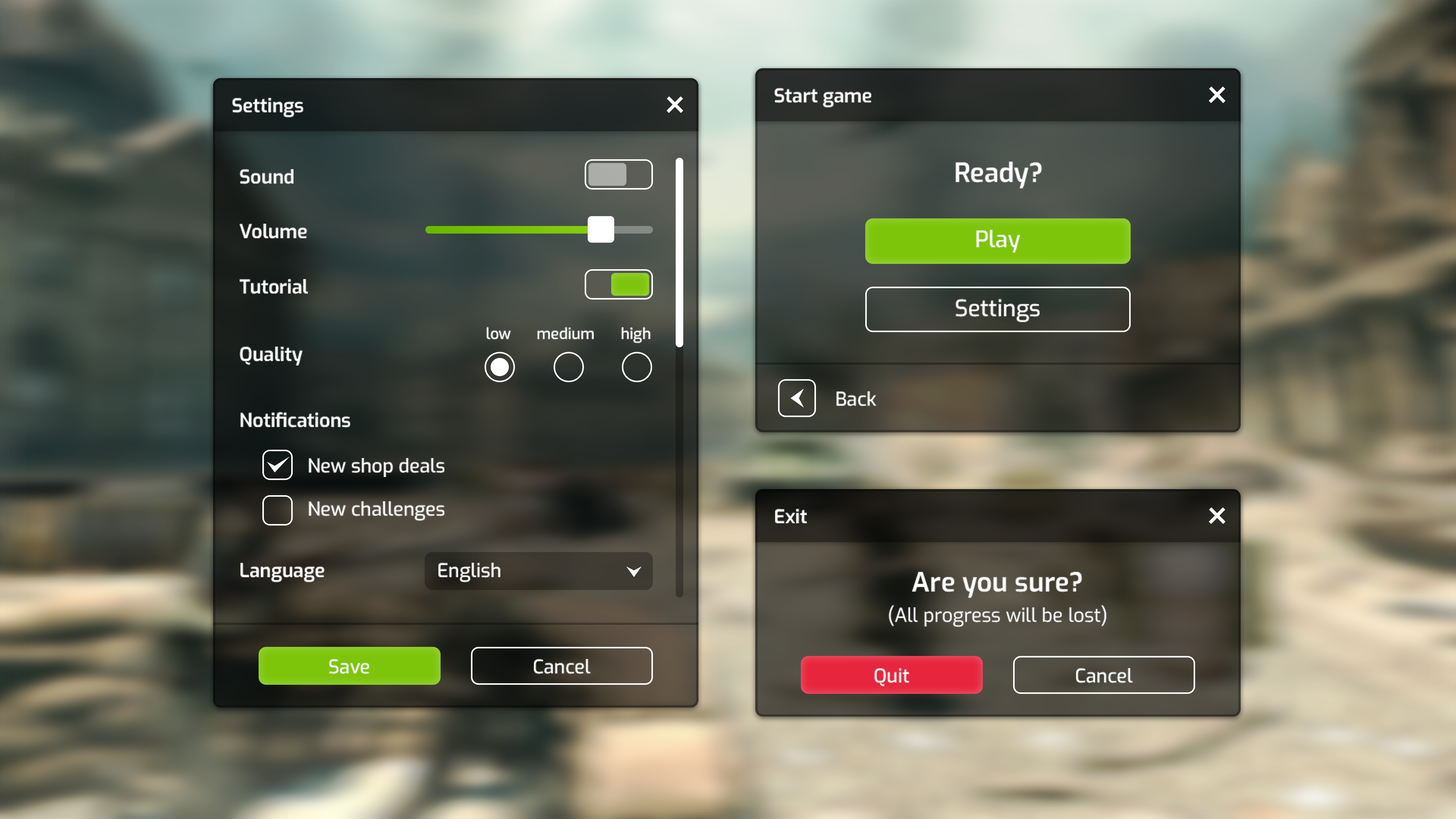
<style>
.page{position:relative;width:1456px;height:819px}
.page>*{position:absolute;margin:0}
.t1{font:19px "Exo-SemiBold";color:#ffffff}
.t2{font:26.5px "Exo-SemiBold";color:#ffffff}
.t3{font:22.7px "Exo-Medium";color:#ffffff}
.t4{font:15.2px "Exo-Medium";color:#ffffff}
.t5{font:19px "Exo-Medium";color:#ffffff}
.t6{font:19px/30.3px "Exo-Regular";color:#ffffff}
.t7{font:26.5px/30.3px "Exo-SemiBold";color:#ffffff}
</style>
<div class="page">
<p class="t1" style="left:774px;top:88px;width:97px;height:20px">Start game</p>
<p class="t1" style="left:232px;top:98px;width:71px;height:20px">Settings</p>
<p class="t2" style="left:955px;top:162px;width:87px;height:27px">Ready?</p>
<p class="t1" style="left:240px;top:169px;width:53px;height:15px">Sound</p>
<p class="t1" style="left:240px;top:224px;width:67px;height:15px">Volume</p>
<p class="t3" style="left:976px;top:230px;width:44px;height:23px">Play</p>
<p class="t1" style="left:240px;top:279px;width:68px;height:15px">Tutorial</p>
<p class="t3" style="left:955px;top:299px;width:85px;height:23px">Settings</p>
<p class="t4" style="left:486px;top:327px;width:25px;height:13px">low</p>
<p class="t4" style="left:537px;top:327px;width:57px;height:13px">medium</p>
<p class="t4" style="left:621px;top:327px;width:30px;height:17px">high</p>
<p class="t1" style="left:240px;top:347px;width:63px;height:19px">Quality</p>
<p class="t5" style="left:836px;top:391px;width:41px;height:15px">Back</p>
<p class="t1" style="left:240px;top:412px;width:110px;height:16px">Notifications</p>
<p class="t5" style="left:309px;top:458px;width:135px;height:19px">New shop deals</p>
<p class="t5" style="left:309px;top:501px;width:135px;height:20px">New challenges</p>
<p class="t1" style="left:775px;top:509px;width:32px;height:14px">Exit</p>
<p class="t1" style="left:240px;top:563px;width:85px;height:19px">Language</p>
<p class="t5" style="left:438px;top:563px;width:62px;height:19px">English</p>
<p class="t6" style="left:889px;top:572px;width:217px;height:55px;text-align:center"><span class="t7">Are you sure?<br></span>(All progress will be lost)</p>
<p class="t5" style="left:329px;top:659px;width:40px;height:15px">Save</p>
<p class="t5" style="left:534px;top:659px;width:57px;height:15px">Cancel</p>
<p class="t5" style="left:874px;top:668px;width:35px;height:18px">Quit</p>
<p class="t5" style="left:1076px;top:668px;width:57px;height:15px">Cancel</p>
</div>
